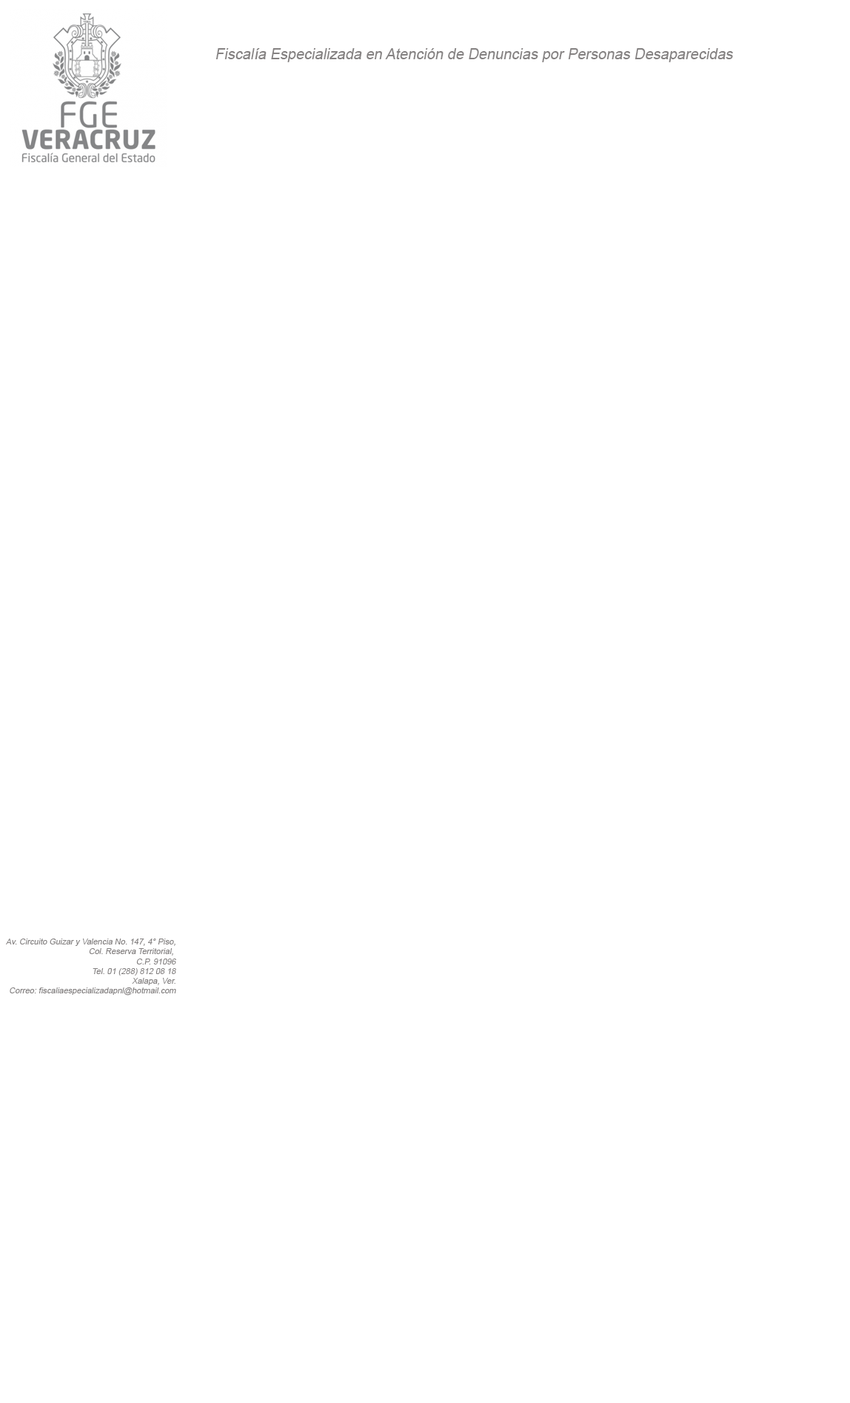
<style>
.page{position:relative;width:850px;height:1403px;background:#ffffff}
.page>*{position:absolute;margin:0}
.t1{font:14.8px "ArialMT";color:#858282;font-style:italic}
.t2{font:8.1px "ArialMT";color:#858282;font-style:italic}
</style>
<div class="page">
<p class="t1" style="left:216px;top:48px;width:517px;height:14px">Fiscalía Especializada en Atención de Denuncias por Personas Desaparecidas</p>
<p class="t2" style="left:6px;top:938px;width:170px;height:57px;text-align:right">Av. Circuito Guizar y Valencia No. 147, 4° Piso,<br>Col. Reserva Territorial, <br>C.P. 91096<br>Tel. 01 (288) 812 08 18<br>Xalapa, Ver.<br>Correo: fiscaliaespecializadapnl@hotmail.com</p>
</div>
